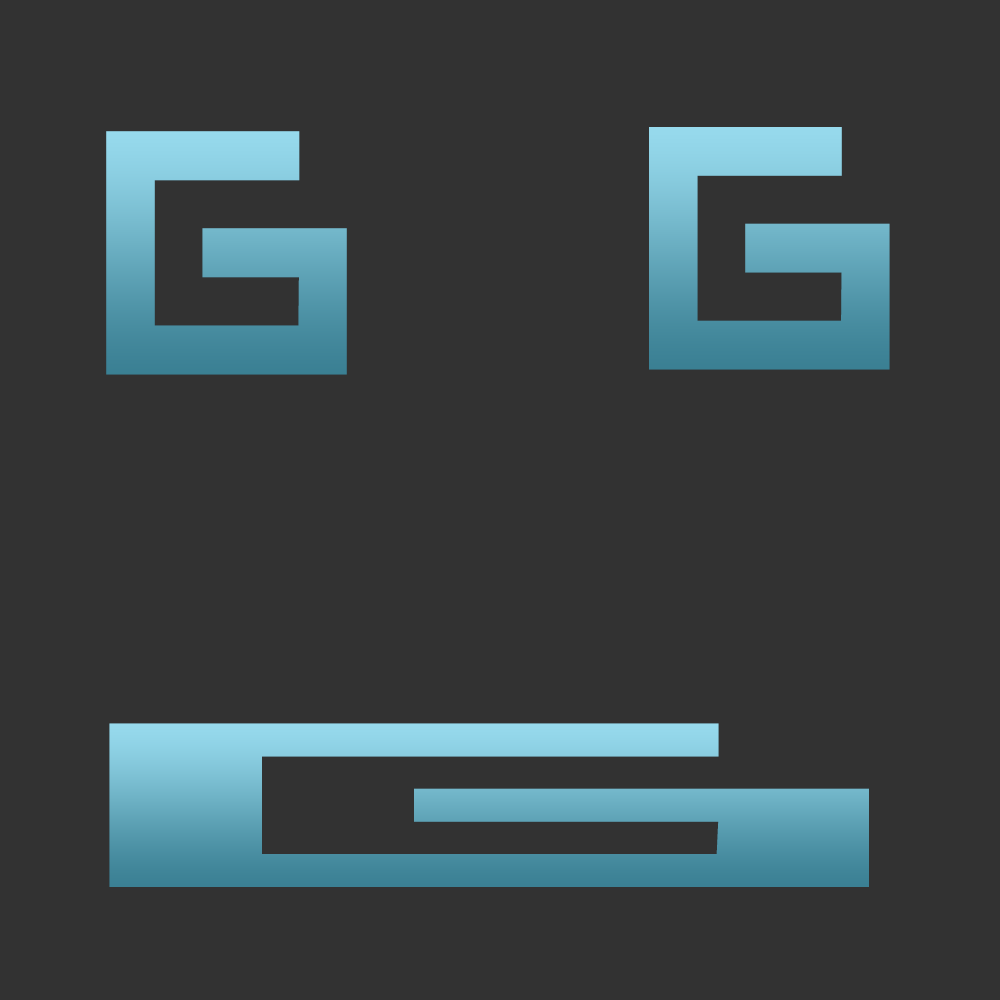
<style>
.page{position:relative;width:1000px;height:1000px;background:#323232}
.page>*{position:absolute;margin:0}
.t1{font:485.8px "Beatbox";letter-spacing:0.1em}
.t2{font:484.7px "Beatbox";letter-spacing:0.1em}
.t3{font:326.3px "Beatbox";letter-spacing:0.1em;scale:4.66 1}
</style>
<div class="page">
<p class="t1" style="left:106px;top:131px;width:241px;height:244px">G</p>
<p class="t2" style="left:649px;top:127px;width:241px;height:243px">G</p>
<p class="t3" style="left:109px;top:723px;width:760px;height:164px">G</p>
</div>
